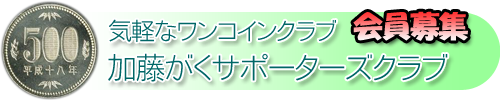
<style>
.page{position:relative;width:500px;height:100px;background:#ffffff}
.page>*{position:absolute;margin:0}
.t1{font:30px "HGPSoeiKakupoptai";letter-spacing:-0.05em}
.t2{font:24px "NfMotoyaCedar-W1-90mskp-RKSJ-H";letter-spacing:-0.05em;color:#006666}
.t3{font:30px "NfMotoyaCedar-W1-90mskp-RKSJ-H";letter-spacing:-0.05em;color:#006666}
</style>
<div class="page">
<p class="t1" style="left:353px;top:11px;width:115px;height:30px">会員募集</p>
<p class="t2" style="left:109px;top:19px;width:227px;height:23px">気軽なワンコインクラブ</p>
<p class="t3" style="left:108px;top:53px;width:340px;height:29px">加藤がくサポーターズクラブ</p>
</div>
